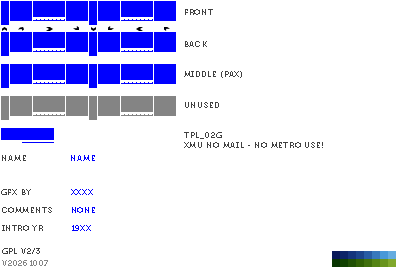
<style>
.page{position:relative;width:400px;height:270px;background:#ffffff}
.page>*{position:absolute;margin:0}
.t1{font:8px "Museo700-Regular";letter-spacing:0.075em;color:#404040;text-transform:uppercase}
.t2{font:8px "Museo700-Regular";letter-spacing:0.075em;color:#0000ff;text-transform:uppercase}
.t3{font:8px "Museo700-Regular";letter-spacing:0.075em;color:#848484;text-transform:uppercase}
</style>
<div class="page">
<p class="t1" style="left:185px;top:9px;width:28px;height:6px">front</p>
<p class="t1" style="left:185px;top:41px;width:22px;height:6px">back</p>
<p class="t1" style="left:184px;top:71px;width:58px;height:7px">middle (pax)</p>
<p class="t1" style="left:185px;top:102px;width:34px;height:6px">UNUSED</p>
<p class="t1" style="left:184px;top:132px;width:139px;height:16px">tpl_02G<br>xmu no mail - no metro use!</p>
<p class="t1" style="left:2px;top:155px;width:24px;height:6px">name</p>
<p class="t2" style="left:71px;top:155px;width:24px;height:6px">name</p>
<p class="t1" style="left:1px;top:189px;width:30px;height:6px">gfx by</p>
<p class="t2" style="left:71px;top:189px;width:22px;height:6px">xxxx</p>
<p class="t1" style="left:2px;top:207px;width:50px;height:6px">comments</p>
<p class="t2" style="left:72px;top:207px;width:23px;height:6px">none</p>
<p class="t1" style="left:2px;top:225px;width:41px;height:6px">intro yr</p>
<p class="t2" style="left:72px;top:225px;width:19px;height:6px">19xx</p>
<p class="t1" style="left:2px;top:248px;width:38px;height:6px">gpl v2/3</p>
<p class="t3" style="left:2px;top:260px;width:46px;height:6px">v20261007</p>
</div>
